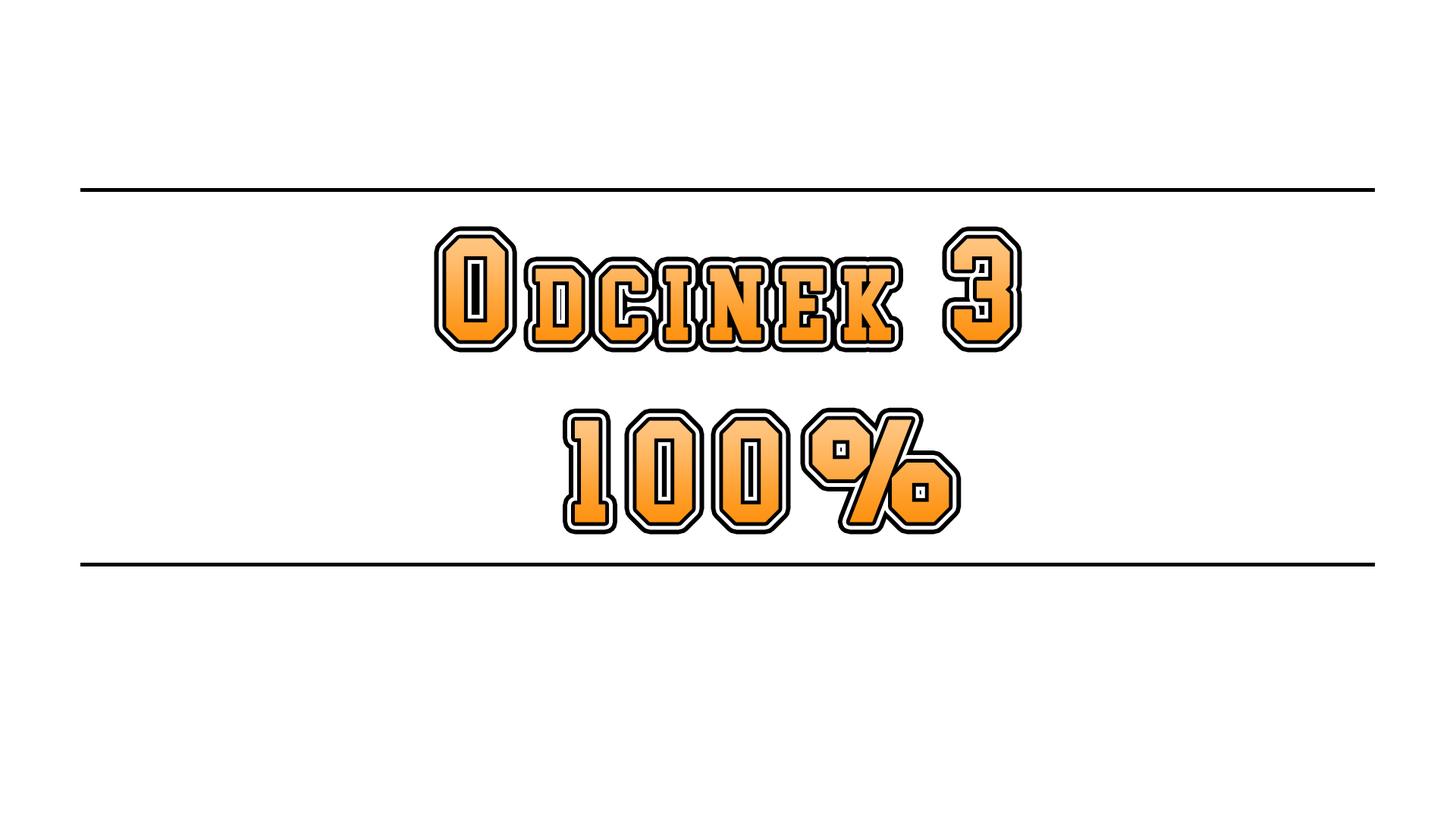
<style>
.page{position:relative;width:1456px;height:819px;background:#ffffff}
.page>*{position:absolute;margin:0}
.t1{font:128.9px "CollegeBlock2.0";letter-spacing:0.175em;font-variant:small-caps}
.t2{font:248.4px "CollegeBlock";letter-spacing:0.175em;font-variant:small-caps}
</style>
<div class="page">
<p class="t1" style="left:446px;top:238px;width:564px;height:102px">Odcinek 3</p>
<p class="t1" style="left:575px;top:420px;width:204px;height:102px">100%</p>
<p class="t2" style="left:812px;top:419px;width:137px;height:103px">%</p>
</div>
